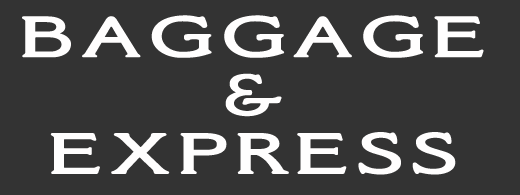
<style>
.page{position:relative;width:520px;height:195px;background:#333333}
.page>*{position:absolute;margin:0}
.t1{font:60px/58.3px "SilentinaFilm";letter-spacing:0.05em;color:#fffefe;font-weight:bold;scale:1.67 1}
</style>
<div class="page">
<p class="t1" style="left:22px;top:15px;width:462px;height:160px;text-align:center">BAGGAGE<br>&amp;<br>EXPRESS</p>
</div>
